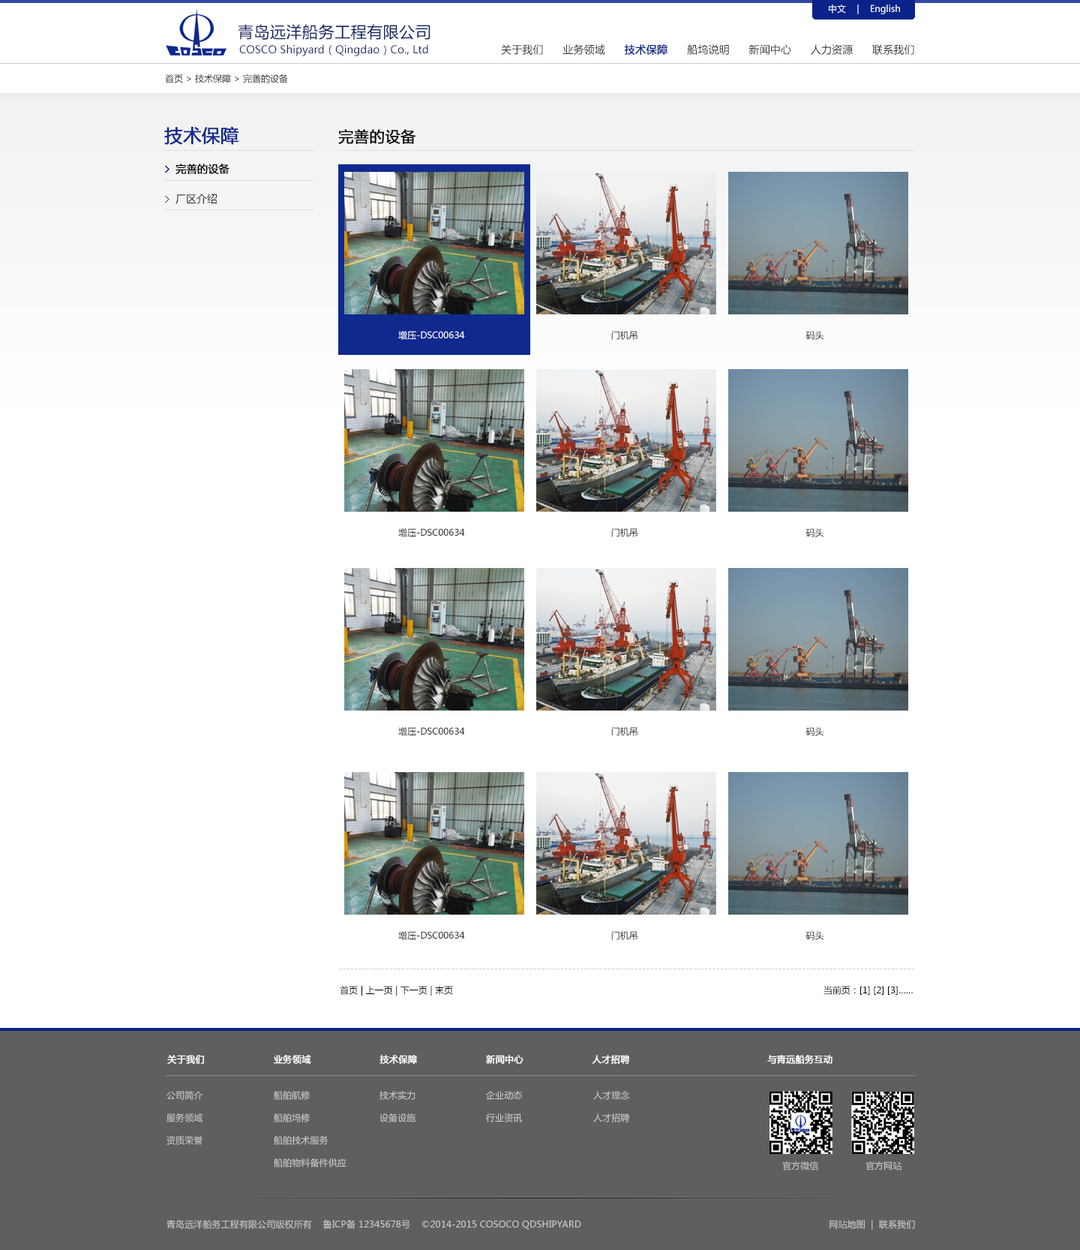
<style>
.page{position:relative;width:1080px;height:1250px;background:#ffffff}
.page>*{position:absolute;margin:0}
.t1{font:9px "MicrosoftYaHei";color:#ffffff}
.t2{font:15.8px "MicrosoftYaHei";letter-spacing:0.025em;color:#112262;text-transform:uppercase}
.t3{font:10.5px "MicrosoftYaHei";letter-spacing:0.01em;color:#112262}
.t4{font:10.5px "MicrosoftYaHei";letter-spacing:0.01em;color:#333333;text-transform:uppercase}
.t5{font:10.5px "MicrosoftYaHei";letter-spacing:0.01em;color:#10298e;text-transform:uppercase;font-weight:bold}
.t6{font:9px "MicrosoftYaHei";color:#272727}
.t7{font:18px "MicrosoftYaHei";letter-spacing:0.01em;color:#10298e;text-transform:uppercase;font-weight:bold}
.t8{font:15px "MicrosoftYaHei";letter-spacing:0.01em;color:#000000;text-transform:uppercase;font-weight:bold}
.t9{font:10.5px/30px "MicrosoftYaHei";color:#000000;font-weight:bold}
.t10{font:10.5px/30px "MicrosoftYaHei";color:#272727}
.t11{font:9px "MicrosoftYaHei";color:#cccccc;text-transform:uppercase}
.t12{font:9px "MicrosoftYaHei";color:#000000}
.t13{font:9px "MicrosoftYaHei";letter-spacing:0.01em;color:#ffffff;text-transform:uppercase;font-weight:bold}
.t14{font:9px/22.5px "MicrosoftYaHei";letter-spacing:0.01em;color:#cccccc;text-transform:uppercase}
.t15{font:9px "MicrosoftYaHei";letter-spacing:0.01em;color:#cccccc;text-transform:uppercase}
</style>
<div class="page">
<p class="t1" style="left:829px;top:4px;width:71px;height:10px">中文    |    English</p>
<p class="t2" style="left:238px;top:24px;width:192px;height:16px">青岛远洋船务工程有限公司</p>
<p class="t3" style="left:239px;top:44px;width:189px;height:12px">COSCO Shipyard（Qingdao）Co., Ltd</p>
<p class="t4" style="left:501px;top:44px;width:413px;height:12px">关于我们      业务领域      <span class="t5">技术保障</span>      船坞说明      新闻中心      人力资源      联系我们</p>
<p class="t6" style="left:165px;top:74px;width:123px;height:9px">首页 &gt; 技术保障 &gt; 完善的设备</p>
<p class="t7" style="left:164px;top:126px;width:75px;height:19px">技术保障</p>
<p class="t8" style="left:338px;top:129px;width:78px;height:15px">完善的设备</p>
<p class="t9" style="left:176px;top:164px;width:54px;height:40px">完善的设备<br><span class="t10">厂区介绍</span></p>
<p class="t6" style="left:398px;top:527px;width:426px;height:10px">增压-DSC00634                                                       门机吊                                                               码头</p>
<p class="t6" style="left:398px;top:726px;width:426px;height:10px">增压-DSC00634                                                       门机吊                                                               码头</p>
<p class="t6" style="left:398px;top:930px;width:426px;height:10px">增压-DSC00634                                                       门机吊                                                               码头</p>
<p class="t11" style="left:339px;top:968px;width:575px;height:1px">----------------------------------------------------------------------------------------------------------------------------------------------------</p>
<p class="t12" style="left:340px;top:986px;width:573px;height:9px">首页 | 上一页 | 下一页 | 末页                                                                                                                                           当前页：[1] [2] [3]……</p>
<p class="t13" style="left:167px;top:1054px;width:665px;height:10px">关于我们                       业务领域                       技术保障                       新闻中心                       人才招聘                                              与青远船务互动</p>
<p class="t14" style="left:166px;top:1090px;width:36px;height:54px">公司简介<br>服务领域<br>资质荣誉</p>
<p class="t14" style="left:274px;top:1090px;width:72px;height:77px">船舶航修<br>船舶坞修<br>船舶技术服务<br>船舶物料备件供应</p>
<p class="t14" style="left:380px;top:1090px;width:36px;height:32px">技术实力<br>设备设施</p>
<p class="t14" style="left:486px;top:1090px;width:37px;height:32px">企业动态<br>行业资讯</p>
<p class="t14" style="left:593px;top:1090px;width:36px;height:32px">人才理念<br>人才招聘</p>
<p class="t15" style="left:782px;top:1161px;width:120px;height:9px">官方微信                 官方网站</p>
<p class="t15" style="left:166px;top:1219px;width:749px;height:10px">青岛远洋船务工程有限公司版权所有    鲁ICP备 12345678号    ©2014-2015 COSOCO QDSHIPYARD                                                                                          网站地图  |  联系我们</p>
</div>
